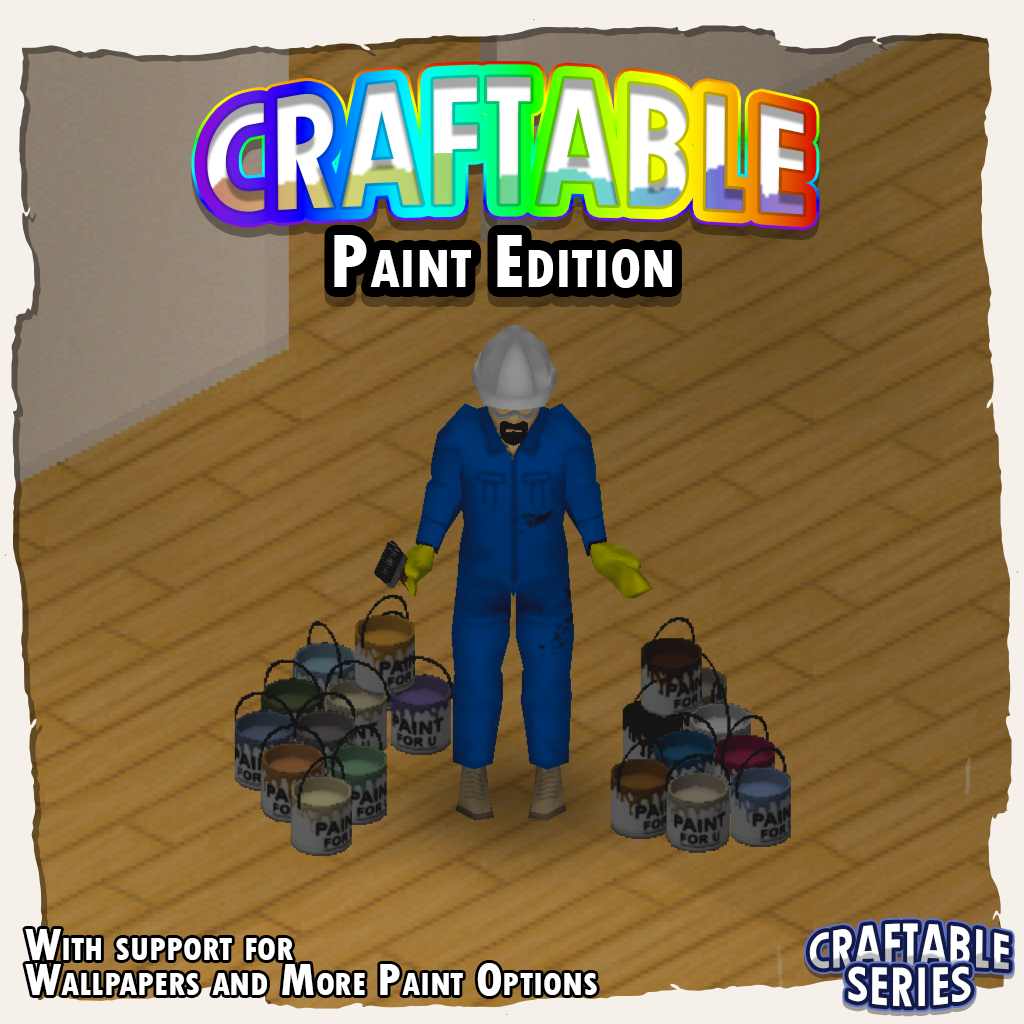
<style>
.page{position:relative;width:1024px;height:1024px}
.page>*{position:absolute;margin:0}
.t1{font:149.6px "TwCenMT-CondensedExtraBold";text-transform:uppercase}
.t2{font:149.6px "TwCenMT-CondensedExtraBold";font-variant:small-caps}
.t3{font:79.6px "TwCenMT-CondensedExtraBold";color:#ffffff;font-variant:small-caps}
.t4{font:48px/35px "TwCenMT-CondensedExtraBold";color:#ffffff;font-variant:small-caps}
.t5{font:49.9px "TwCenMT-CondensedExtraBold";color:#ffffff;text-transform:uppercase}
.t6{font:49.9px "TwCenMT-CondensedExtraBold";color:#ffffff;font-variant:small-caps}
.t7{font:49.8px "TwCenMT-CondensedExtraBold";color:#ffffff;font-variant:small-caps}
</style>
<div class="page">
<p class="t1" style="left:207px;top:77px;width:597px;height:138px"><span class="t2">C</span>raftable</p>
<p class="t3" style="left:334px;top:235px;width:338px;height:53px">Paint Edition</p>
<p class="t4" style="left:25px;top:929px;width:572px;height:67px">With support for <br>Wallpapers and More Paint Options</p>
<p class="t5" style="left:809px;top:923px;width:200px;height:47px"><span class="t6">C</span>raftable</p>
<p class="t7" style="left:848px;top:966px;width:123px;height:41px">SERIES</p>
</div>
